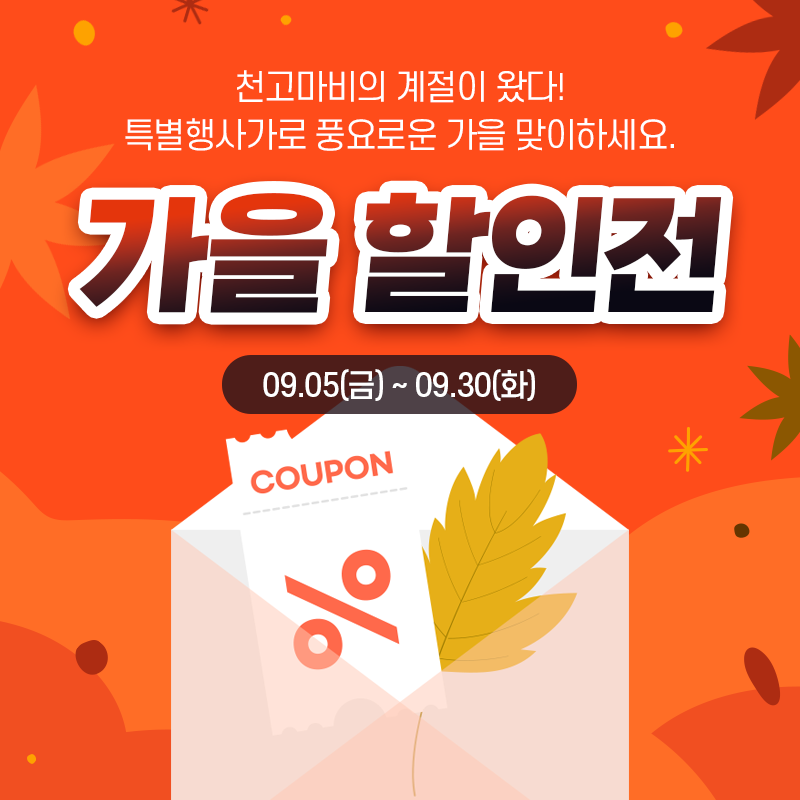
<style>
.page{position:relative;width:800px;height:800px;background:#ff4c1a}
.page>*{position:absolute;margin:0}
.t1{font:34.3px/48.3px "S-CoreDream-4Regular";letter-spacing:-0.05em;color:#ffffff}
.t2{font:143.7px "GangwonEduPowerExtraBold";letter-spacing:-0.025em}
.t3{font:30.8px "S-CoreDream-5Medium";letter-spacing:-0.05em;color:#ffffff}
</style>
<div class="page">
<p class="t1" style="left:125px;top:70px;width:549px;height:81px;text-align:center">천고마비의 계절이 왔다!<br>특별행사가로 풍요로운 가을 맞이하세요.</p>
<p class="t2" style="left:79px;top:192px;width:643px;height:121px">가을 할인전</p>
<p class="t3" style="left:263px;top:369px;width:272px;height:32px">09.05(금) ~ 09.30(화)</p>
</div>
